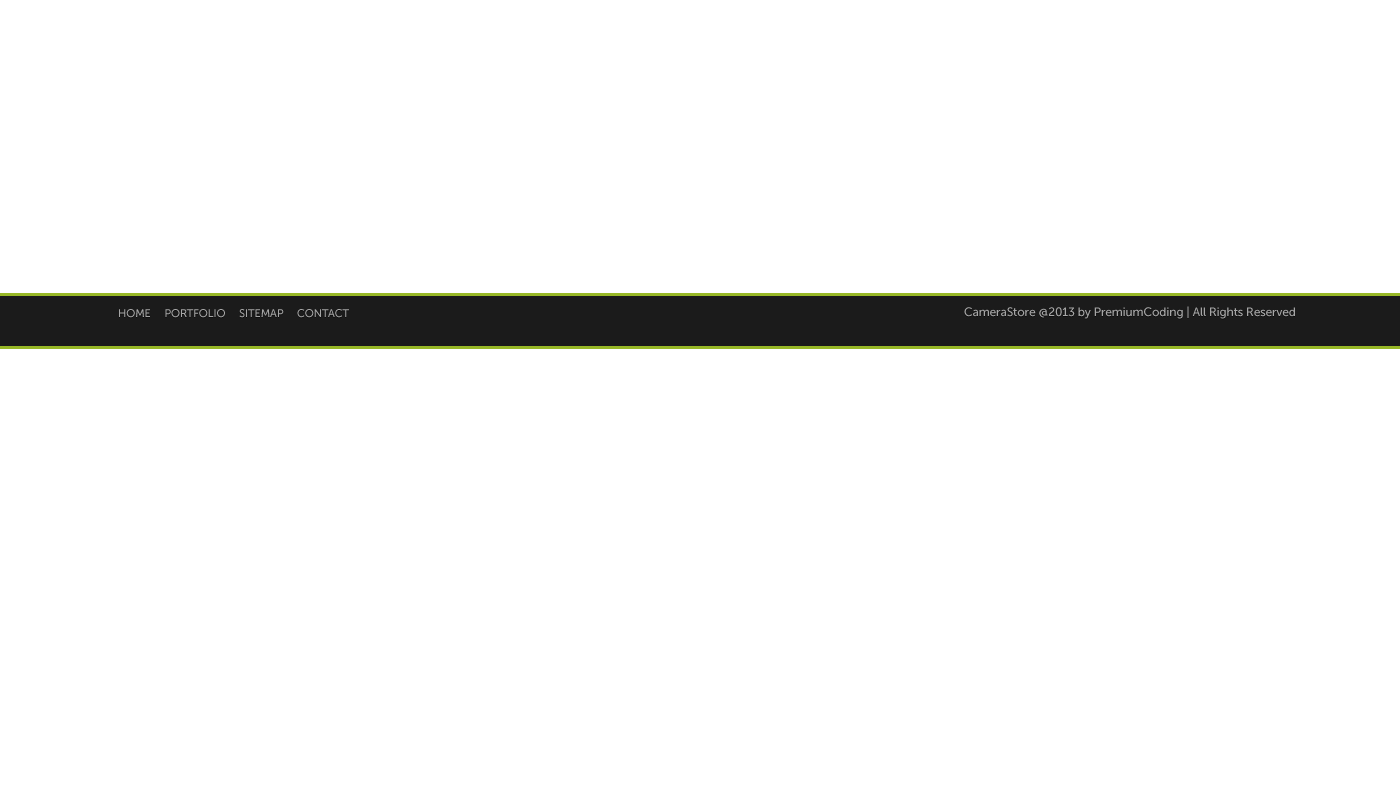
<style>
.page{position:relative;width:1400px;height:800px;background:#ffffff}
.page>*{position:absolute;margin:0}
.t1{font:11px "MuseoSans-500";letter-spacing:-0.01em;color:#a6a6a6}
.t2{font:12px "MuseoSans-500";letter-spacing:-0.01em;color:#a6a6a6}
</style>
<div class="page">
<p class="t1" style="left:119px;top:309px;width:230px;height:9px">HOME     PORTFOLIO     SITEMAP     CONTACT</p>
<p class="t2" style="left:964px;top:306px;width:331px;height:13px">CameraStore @2013 by PremiumCoding | All Rights Reserved</p>
</div>
